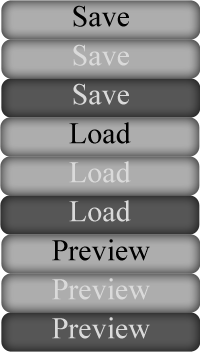
<style>
.page{position:relative;width:200px;height:352px}
.page>*{position:absolute;margin:0}
.t1{font:30px "WidePixel-7";color:#000000}
.t2{font:30px "WidePixel-7";color:#dadada}
</style>
<div class="page">
<p class="t1" style="left:73px;top:5px;width:56px;height:22px">Save</p>
<p class="t2" style="left:73px;top:44px;width:56px;height:22px">Save</p>
<p class="t2" style="left:73px;top:83px;width:56px;height:22px">Save</p>
<p class="t1" style="left:69px;top:122px;width:62px;height:22px">Load</p>
<p class="t2" style="left:69px;top:161px;width:62px;height:22px">Load</p>
<p class="t2" style="left:69px;top:200px;width:62px;height:22px">Load</p>
<p class="t1" style="left:52px;top:239px;width:98px;height:22px">Preview</p>
<p class="t2" style="left:52px;top:278px;width:98px;height:22px">Preview</p>
<p class="t2" style="left:52px;top:317px;width:98px;height:22px">Preview</p>
</div>
